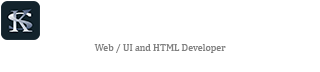
<style>
.page{position:relative;width:320px;height:72px;background:#ffffff}
.page>*{position:absolute;margin:0}
.t1{font:10px "Cambria";color:#818181}
</style>
<div class="page">
<p class="t1" style="left:94px;top:44px;width:132px;height:9px">Web / UI and HTML Developer</p>
</div>
